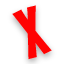
<style>
.page{position:relative;width:64px;height:64px;background:#ffffff}
.page>*{position:absolute;margin:0}
.t1{font:60px "Splatoon2";color:#ff0202}
</style>
<div class="page">
<p class="t1" style="left:12px;top:5px;width:40px;height:55px;rotate:-20deg">X</p>
</div>
